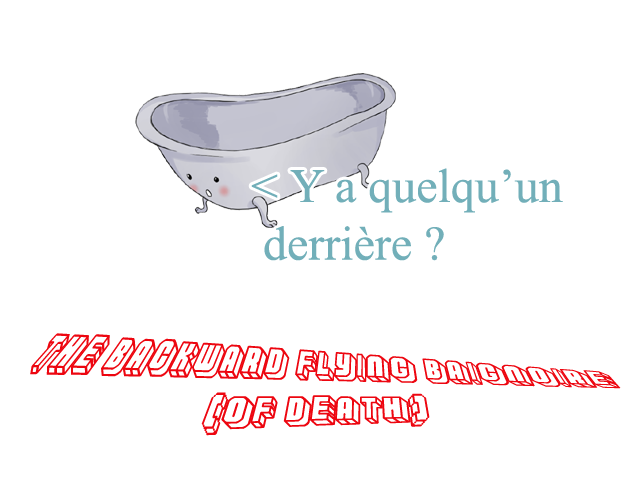
<style>
.page{position:relative;width:640px;height:480px;background:#ffffff}
.page>*{position:absolute;margin:0}
.t1{font:48px "TimesNewRomanPSMT";color:#72afb9}
.t2{font:36px "Habbo-Regular";color:#ed0610}
</style>
<div class="page">
<p class="t1" style="left:251px;top:168px;width:312px;height:93px">&lt; Y a quelqu’un<br> derrière ?</p>
<p class="t2" style="left:30px;top:333px;width:591px;height:103px;text-align:center">The backward flying baignoire<br> (of death)</p>
</div>
